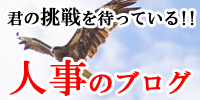
<style>
.page{position:relative;width:200px;height:100px}
.page>*{position:absolute;margin:0}
.t1{font:16px "HGMinchoB";color:#000000;font-weight:bold}
.t2{font:20px "HGMinchoB";color:#000000;font-weight:bold}
.t3{font:25px "HGMinchoB";color:#fa0000;font-weight:bold}
.t4{font:39px "HGMinchoB";color:#fa0000;font-weight:bold}
</style>
<div class="page">
<p class="t1" style="left:7px;top:7px;width:187px;height:20px">君の<span class="t2">挑戦</span>を待っている!!</p>
<p class="t3" style="left:9px;top:59px;width:182px;height:37px"><span class="t4">人事</span>のブログ</p>
</div>
